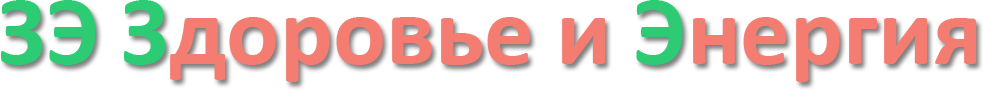
<style>
.page{position:relative;width:984px;height:90px;background:#ffffff}
.page>*{position:absolute;margin:0}
.t1{font:98.9px "Calibri-Bold";color:#f57c71}
.t2{font:98.9px "Calibri-Bold";color:#2dcb74}
</style>
<div class="page">
<p class="t1" style="left:1px;top:0px;width:976px;height:82px"><span class="t2">ЗЭ З</span>доровье и<span class="t2"> Э</span>нергия</p>
</div>
